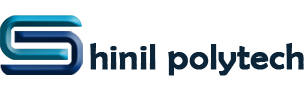
<style>
.page{position:relative;width:305px;height:90px;background:#ffffff}
.page>*{position:absolute;margin:0}
.t1{font:37px "BerlinSansFB-Reg";color:#0b2438;font-weight:bold}
</style>
<div class="page">
<p class="t1" style="left:90px;top:43px;width:214px;height:33px">hinil polytech</p>
</div>
